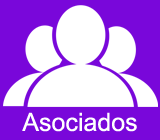
<style>
.page{position:relative;width:160px;height:140px;background:#7907da}
.page>*{position:absolute;margin:0}
.t1{font:25px "ArialMT";color:#ffffff}
</style>
<div class="page">
<p class="t1" style="left:22px;top:112px;width:115px;height:20px">Asociados</p>
</div>
